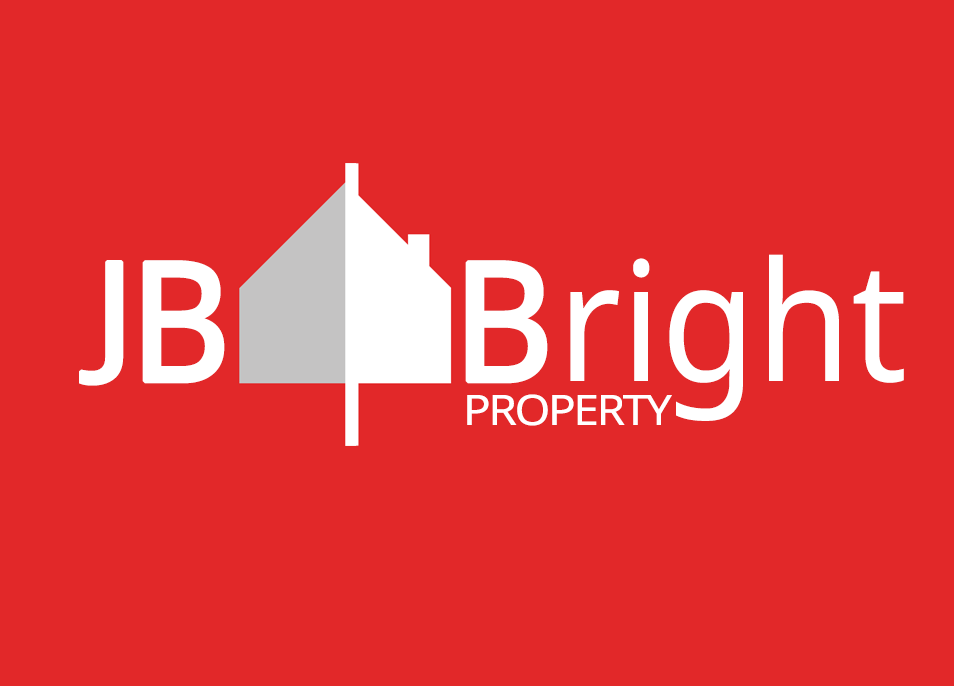
<style>
.page{position:relative;width:954px;height:686px;background:#e22829}
.page>*{position:absolute;margin:0}
.t1{font:166px "SansSerifCollection";color:#ffffff;scale:0.93 1}
.t2{font:166px "SansSerifCollection";color:#ffffff;font-weight:bold;scale:0.93 1}
.t3{font:134.4px "SansSerifCollection";letter-spacing:-0.1em;color:#ffffff;font-weight:bold;scale:1.15 1}
.t4{font:166px "SansSerifCollection";letter-spacing:-0.1em;color:#ffffff;font-weight:bold;scale:0.93 1}
.t5{font:42px "SansSerifCollection";letter-spacing:-0.05em;color:#ffffff;scale:1.09 1}
</style>
<div class="page">
<p class="t1" style="left:465px;top:254px;width:439px;height:167px"><span class="t2">B</span>right</p>
<p class="t3" style="left:79px;top:260px;width:45px;height:126px">J</p>
<p class="t4" style="left:142px;top:260px;width:83px;height:124px">B</p>
<p class="t5" style="left:467px;top:394px;width:205px;height:32px">PROPERTY</p>
</div>
